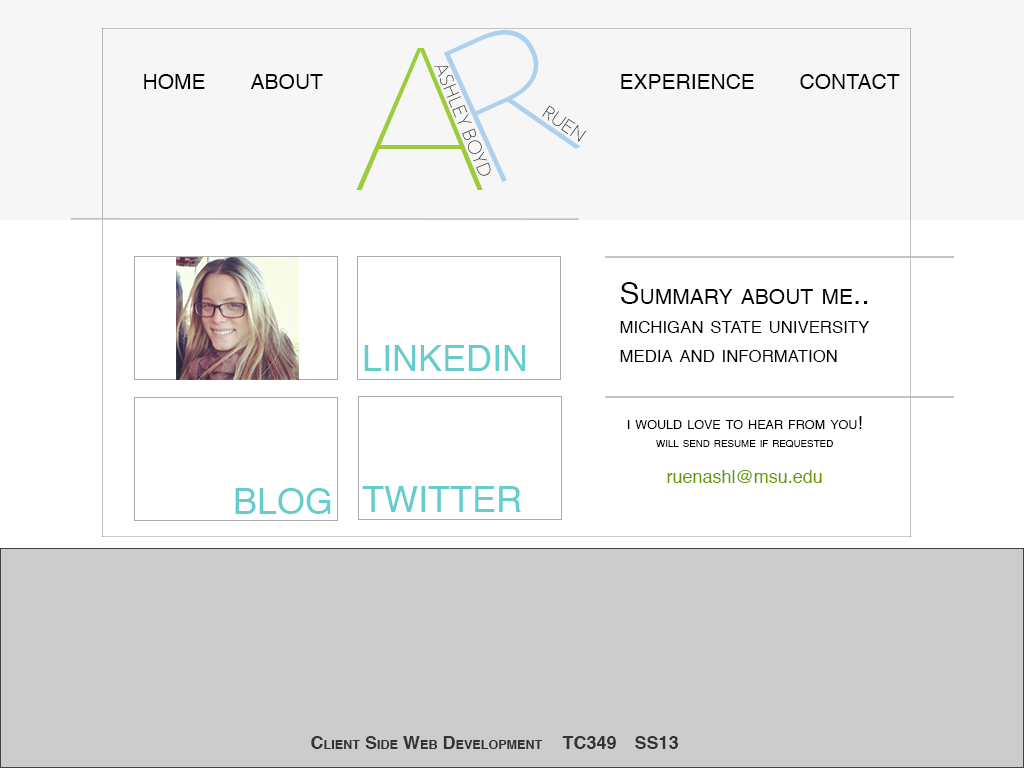
<style>
.page{position:relative;width:1024px;height:768px;background:#ffffff}
.page>*{position:absolute;margin:0}
.t1{font:30px "Helvetica";color:#000000;font-variant:small-caps}
.t2{font:24px "Helvetica";color:#000000;font-variant:small-caps}
.t3{font:30px/24px "Helvetica";color:#000000;font-variant:small-caps}
.t4{font:36px "Helvetica";color:#66cccc;font-variant:small-caps}
.t5{font:18px/18px "Helvetica";color:#000000;font-variant:small-caps}
.t6{font:14px/18px "Helvetica";color:#000000;font-variant:small-caps}
.t7{font:18px/18px "Helvetica";color:#669900}
.t8{font:18px "Helvetica-Bold";color:#333333;font-variant:small-caps}
</style>
<div class="page">
<p class="t1" style="left:144px;top:74px;width:179px;height:15px">home  about</p>
<p class="t1" style="left:621px;top:74px;width:279px;height:15px">experience  contact</p>
<p class="t2" style="left:620px;top:282px;width:249px;height:80px"><span class="t3">Summary about me..<br></span>michigan state university<br>media and information</p>
<p class="t4" style="left:364px;top:345px;width:162px;height:26px">LINKEDIN</p>
<p class="t5" style="left:627px;top:416px;width:235px;height:67px;text-align:center">i would love to hear from you! <span class="t6">will send resume if requested<br><br></span><span class="t7">ruenashl@msu.edu</span></p>
<p class="t4" style="left:362px;top:486px;width:159px;height:26px">TWITTER</p>
<p class="t4" style="left:235px;top:488px;width:96px;height:26px">BLOG</p>
<p class="t8" style="left:311px;top:736px;width:367px;height:13px">Client Side Web Development TC349 SS13</p>
</div>
